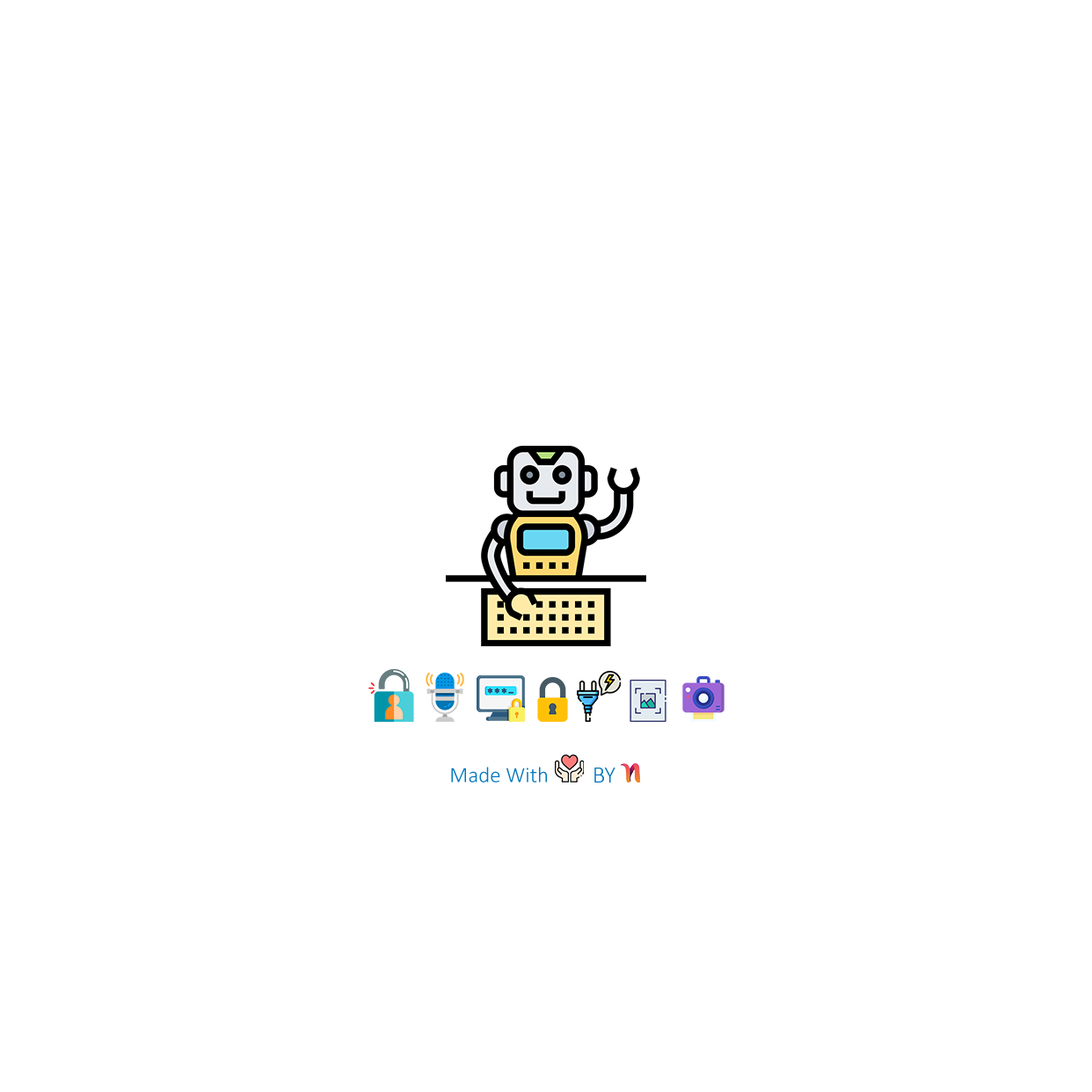
<style>
.page{position:relative;width:1092px;height:1092px;background:#ffffff}
.page>*{position:absolute;margin:0}
.t1{font:22px "Calibri-Light";color:#0077bc}
.t2{font:23.7px "Calibri-Light";color:#0077bc}
</style>
<div class="page">
<p class="t1" style="left:451px;top:767px;width:96px;height:16px">Made With</p>
<p class="t2" style="left:594px;top:768px;width:21px;height:15px">BY</p>
</div>
